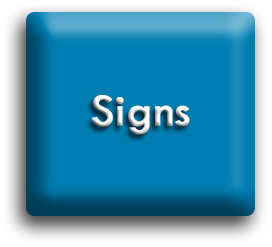
<style>
.page{position:relative;width:272px;height:247px;background:#007db1}
.page>*{position:absolute;margin:0}
.t1{font:46.8px "TwCenMT-Regular";font-weight:bold}
</style>
<div class="page">
<p class="t1" style="left:91px;top:95px;width:99px;height:40px">Signs</p>
</div>
